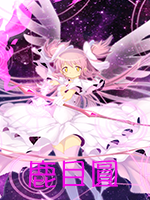
<style>
.page{position:relative;width:150px;height:200px}
.page>*{position:absolute;margin:0}
.t1{font:30px "DFPOP1-W5-WIN-BF";letter-spacing:0.04em;color:#f30ae5}
</style>
<div class="page">
<p class="t1" style="left:28px;top:160px;width:90px;height:28px">鹿目圓</p>
</div>
